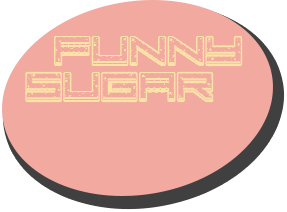
<style>
.page{position:relative;width:287px;height:212px;background:#f1a9a0}
.page>*{position:absolute;margin:0}
.t1{font:30px "CrazyCOokies";color:#fde3a7}
</style>
<div class="page">
<p class="t1" style="left:25px;top:35px;width:218px;height:68px">Funny Sugar</p>
</div>
